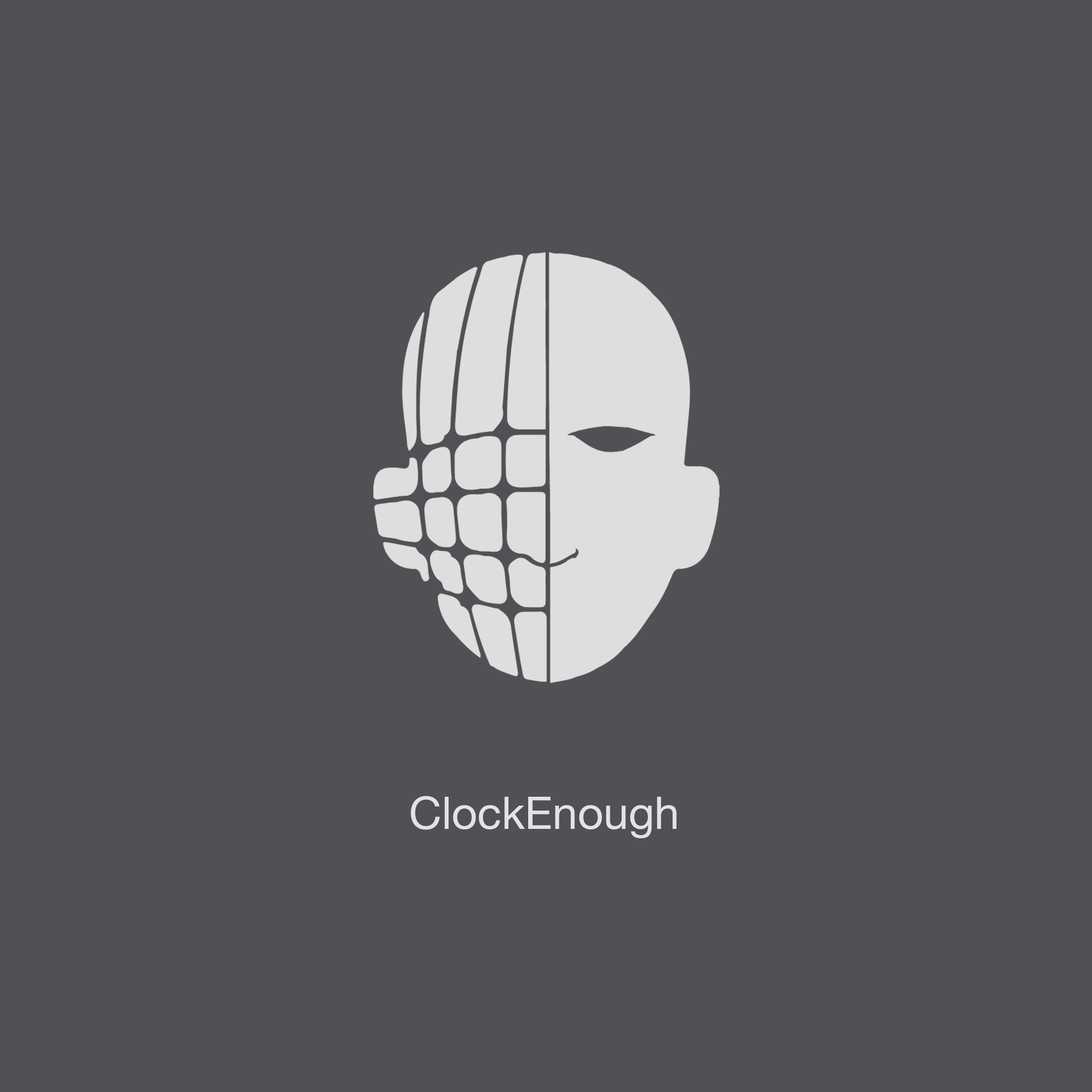
<style>
.page{position:relative;width:1092px;height:1092px;background:#4f5155}
.page>*{position:absolute;margin:0}
.t1{font:45px "HelveticaNeue";color:#e3e3e4}
</style>
<div class="page">
<p class="t1" style="left:410px;top:796px;width:267px;height:42px">ClockEnough</p>
</div>
